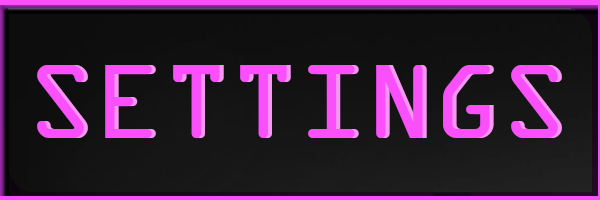
<style>
.page{position:relative;width:600px;height:200px}
.page>*{position:absolute;margin:0}
.t1{font:112px "OCRAExtended";color:#f950fb}
</style>
<div class="page">
<p class="t1" style="left:37px;top:65px;width:521px;height:73px">SETTINGS</p>
<p class="t1" style="left:41px;top:65px;width:521px;height:73px">SETTINGS</p>
</div>
